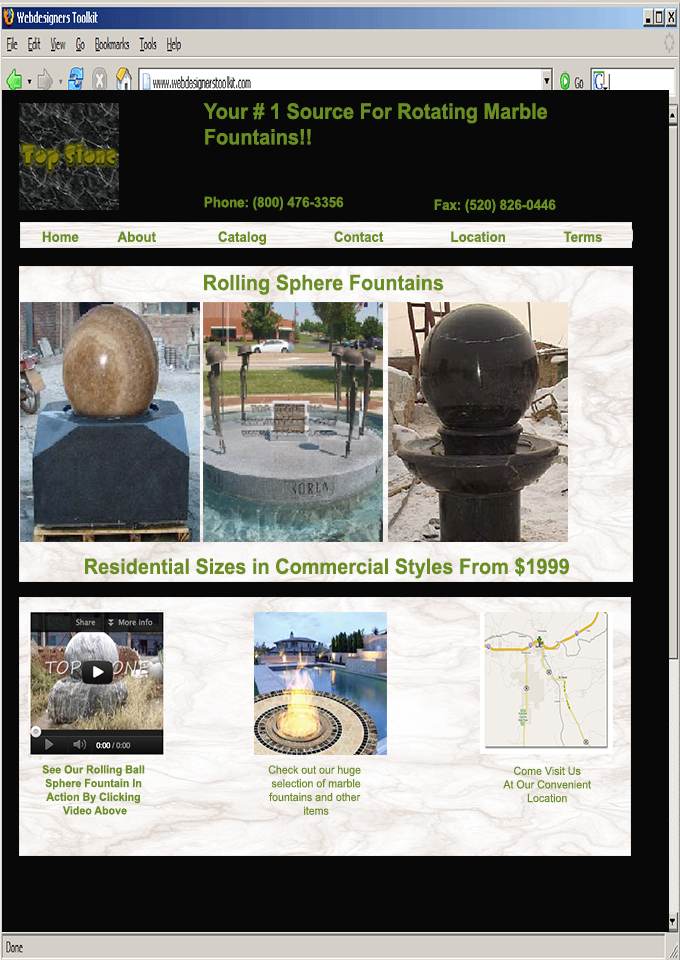
<style>
.page{position:relative;width:680px;height:960px;background:#080808}
.page>*{position:absolute;margin:0}
.t1{font:21.3px "Arial-BoldMT";color:#6b8e23;scale:0.93 1}
.t2{font:14.2px "Arial-BoldMT";color:#6b8e23;scale:0.93 1}
.t3{font:11.4px "Arial-BoldMT";color:#6b8e23;scale:0.94 1}
.t4{font:11.4px "ArialMT";color:#6b8e23;scale:0.93 1}
.t5{font:11.3px "ArialMT";color:#6b8e23;scale:0.94 1}
</style>
<div class="page">
<p class="t1" style="left:203px;top:103px;width:344px;height:42px">Your # 1 Source For Rotating Marble <br>Fountains!!</p>
<p class="t2" style="left:204px;top:196px;width:140px;height:15px">Phone: (800) 476-3356</p>
<p class="t2" style="left:434px;top:199px;width:122px;height:14px">Fax: (520) 826-0446</p>
<p class="t2" style="left:42px;top:231px;width:37px;height:11px">Home</p>
<p class="t2" style="left:117px;top:231px;width:39px;height:11px">About</p>
<p class="t2" style="left:218px;top:231px;width:48px;height:14px">Catalog</p>
<p class="t2" style="left:334px;top:231px;width:50px;height:11px">Contact</p>
<p class="t2" style="left:451px;top:231px;width:54px;height:11px">Location</p>
<p class="t2" style="left:563px;top:231px;width:39px;height:11px">Terms</p>
<p class="t1" style="left:204px;top:274px;width:240px;height:21px">Rolling Sphere Fountains</p>
<p class="t1" style="left:85px;top:557px;width:484px;height:22px">Residential Sizes in Commercial Styles From $1999</p>
<p class="t3" style="left:42px;top:765px;width:103px;height:50px;text-align:center">See Our Rolling Ball <br>Sphere Fountain In <br>Action By Clicking <br>Video Above</p>
<p class="t4" style="left:268px;top:765px;width:93px;height:50px;text-align:center">Check out our huge <br>selection of marble<br>fountains and other <br>items</p>
<p class="t5" style="left:503px;top:766px;width:88px;height:37px;text-align:center">Come Visit Us<br>At Our Convenient<br>Location</p>
</div>
